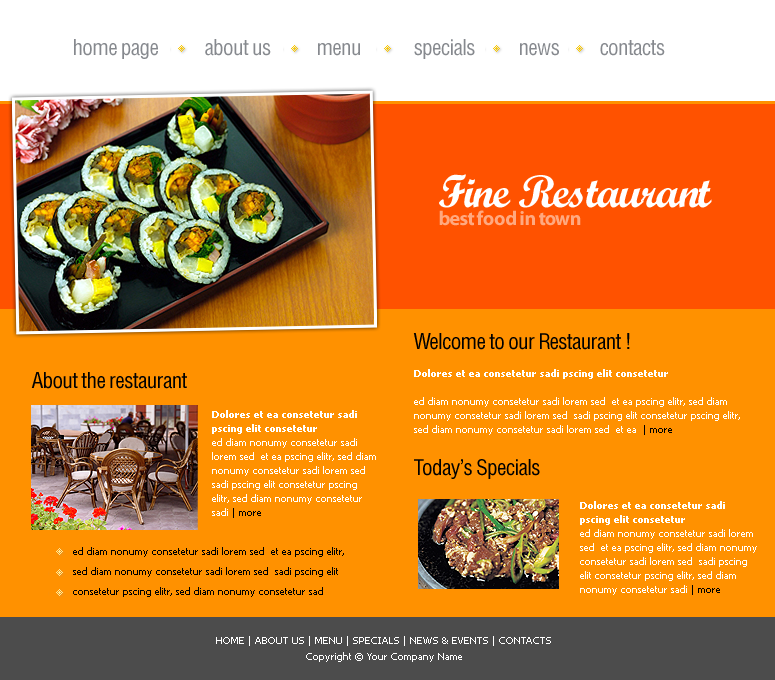
<style>
.page{position:relative;width:775px;height:680px;background:#ff9100}
.page>*{position:absolute;margin:0}
.t1{font:22px "HeliosCond";letter-spacing:-0.04em;color:#86898e}
.t2{font:46px "ScriptMTStd-Bold";letter-spacing:-0.04em;color:#ffffff}
.t3{font:20px "MyriadPro-Bold";letter-spacing:-0.04em;color:#ffa980}
.t4{font:22px "HeliosCond";letter-spacing:-0.04em;color:#000000}
.t5{font:10px/14px "Tahoma";color:#ffffff}
.t6{font:10px/14px "Tahoma-Bold";color:#ffffff}
.t7{font:10px/14px "Tahoma";color:#000000}
.t8{font:10px/20px "Tahoma";color:#000000}
.t9{font:10px/16px "Tahoma";color:#ffffff}
</style>
<div class="page">
<p class="t1" style="left:74px;top:39px;width:84px;height:20px">home page</p>
<p class="t1" style="left:205px;top:39px;width:66px;height:17px">about us</p>
<p class="t1" style="left:414px;top:39px;width:61px;height:20px">specials</p>
<p class="t1" style="left:600px;top:40px;width:65px;height:16px">contacts</p>
<p class="t1" style="left:318px;top:43px;width:42px;height:13px">menu</p>
<p class="t1" style="left:520px;top:43px;width:39px;height:13px">news</p>
<p class="t2" style="left:439px;top:174px;width:273px;height:34px">Fine Restaurant</p>
<p class="t3" style="left:439px;top:210px;width:142px;height:16px">best food in town</p>
<p class="t4" style="left:413px;top:333px;width:217px;height:17px">Welcome to our Restaurant !</p>
<p class="t4" style="left:31px;top:372px;width:156px;height:17px">About the restaurant</p>
<p class="t5" style="left:414px;top:369px;width:326px;height:66px"><span class="t6">Dolores et ea consetetur sadi pscing elit consetetur <br></span><br>ed diam nonumy consetetur sadi lorem sed  et ea pscing elitr, sed diam nonumy consetetur sadi lorem sed  sadi pscing elit consetetur pscing elitr, sed diam nonumy consetetur sadi lorem sed  et ea  <span class="t7">| more</span></p>
<p class="t5" style="left:212px;top:410px;width:164px;height:108px"><span class="t6">Dolores et ea consetetur sadi pscing elit consetetur </span><br>ed diam nonumy consetetur sadi lorem sed  et ea pscing elitr, sed diam nonumy consetetur sadi lorem sed  sadi pscing elit consetetur pscing elitr, sed diam nonumy consetetur sadi <span class="t7">| more</span></p>
<p class="t4" style="left:414px;top:459px;width:126px;height:20px">Today’s Specials</p>
<p class="t5" style="left:580px;top:501px;width:177px;height:94px"><span class="t6">Dolores et ea consetetur sadi pscing elit consetetur </span><br>ed diam nonumy consetetur sadi lorem sed  et ea pscing elitr, sed diam nonumy consetetur sadi lorem sed  sadi pscing elit consetetur pscing elitr, sed diam nonumy consetetur sadi <span class="t7">| more</span></p>
<p class="t8" style="left:73px;top:547px;width:271px;height:50px">ed diam nonumy consetetur sadi lorem sed  et ea pscing elitr, sed diam nonumy consetetur sadi lorem sed  sadi pscing elit consetetur pscing elitr, sed diam nonumy consetetur sad</p>
<p class="t9" style="left:216px;top:636px;width:335px;height:26px;text-align:center">HOME | ABOUT US | MENU | SPECIALS | NEWS &amp; EVENTS | CONTACTS<br>Copyright © Your Company Name</p>
</div>
